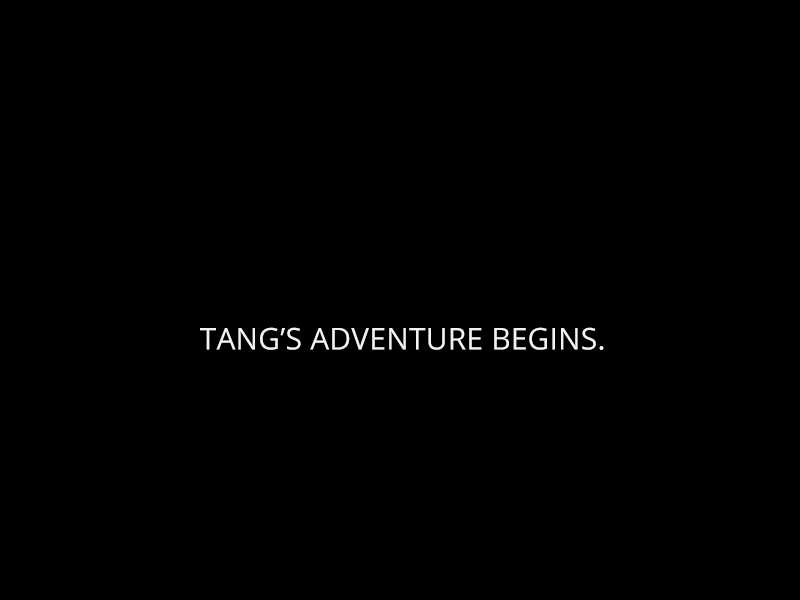
<style>
.page{position:relative;width:800px;height:600px;background:#000000}
.page>*{position:absolute;margin:0}
.t1{font:30px "OpenSans";letter-spacing:0.005em;color:#f3f3f3}
</style>
<div class="page">
<p class="t1" style="left:200px;top:327px;width:404px;height:23px">TANG’S ADVENTURE BEGINS.</p>
</div>
